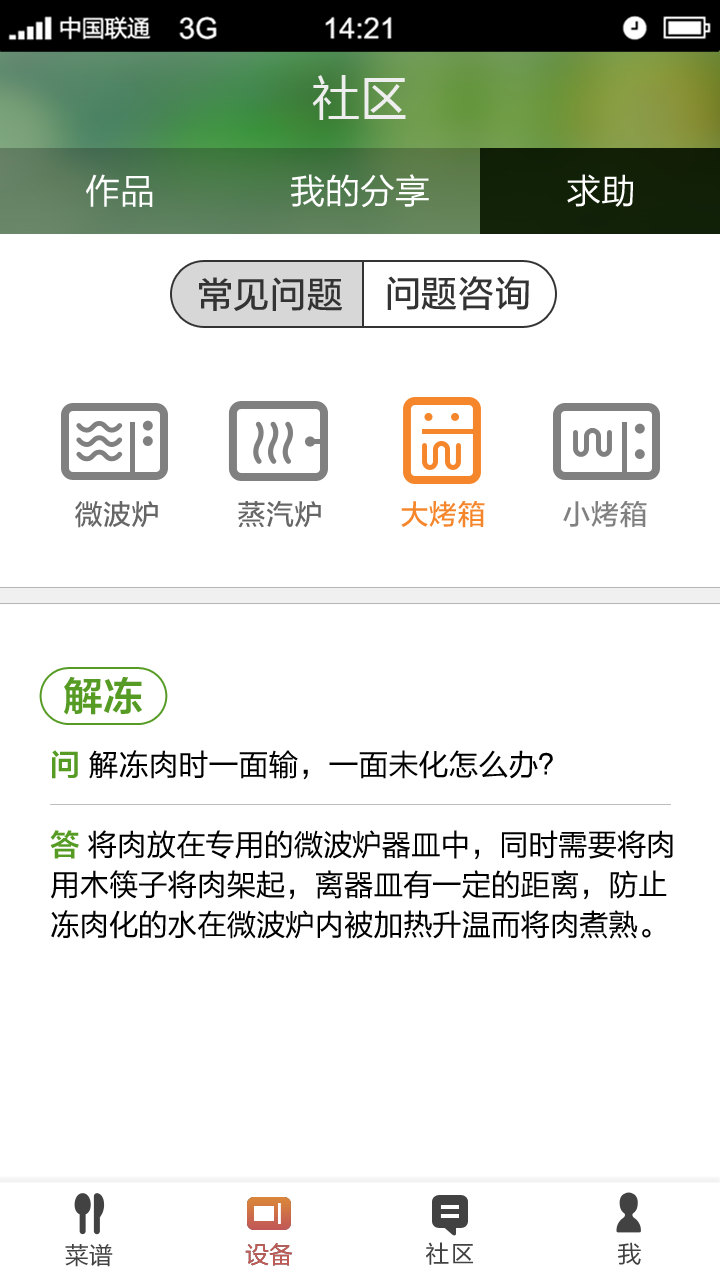
<style>
.page{position:relative;width:720px;height:1280px;background:#ffffff}
.page>*{position:absolute;margin:0}
.t1{font:48px "MicrosoftYaHei";color:#eeeeee}
.t2{font:35px "FZLTHK--GBK1-0";color:#ffffff}
.t3{font:36px "FZLTZHUNHK--GBK1-0";letter-spacing:0.015em;color:#333333}
.t4{font:28px "FZLTZHUNHK--GBK1-0";letter-spacing:0.015em;color:#666666}
.t5{font:28px "FZLTZHUNHK--GBK1-0";letter-spacing:0.015em;color:#f6862b}
.t6{font:28px "FZLTZHUNHK--GBK1-0";letter-spacing:0.015em;color:#808080}
.t7{font:40px "FZLTZCHK--GBK1-0";color:#569b23}
.t8{font:30px/40px "FZLTHK--GBK1-0";color:#000000}
.t9{font:30px/40px "FZLTZCHK--GBK1-0";color:#569b23}
.t10{font:24px "FZLTHK--GBK1-0";color:#424242}
.t11{font:24px "FZLTHK--GBK1-0";color:#c35a55}
.t12{font:24px "FZLTHK--GBK1-0";letter-spacing:0.05em;color:#424242}
</style>
<div class="page">
<p class="t1" style="left:312px;top:75px;width:94px;height:45px">社区</p>
<p class="t2" style="left:86px;top:174px;width:67px;height:33px">作品</p>
<p class="t2" style="left:291px;top:174px;width:138px;height:34px">我的分享</p>
<p class="t2" style="left:567px;top:174px;width:67px;height:33px">求助</p>
<p class="t3" style="left:199px;top:277px;width:143px;height:34px">常见问题</p>
<p class="t3" style="left:387px;top:276px;width:142px;height:35px">问题咨询</p>
<p class="t4" style="left:75px;top:501px;width:83px;height:27px">微波炉</p>
<p class="t4" style="left:238px;top:500px;width:83px;height:28px">蒸汽炉</p>
<p class="t5" style="left:401px;top:500px;width:84px;height:28px">大烤箱</p>
<p class="t6" style="left:563px;top:500px;width:84px;height:28px">小烤箱</p>
<p class="t7" style="left:64px;top:677px;width:78px;height:38px">解冻</p>
<p class="t8" style="left:50px;top:750px;width:623px;height:189px"><span class="t9">问 </span>解冻肉时一面输，一面未化怎么办？<br><span class="t9"><br>答 </span>将肉放在专用的微波炉器皿中，同时需要将肉用木筷子将肉架起，离器皿有一定的距离，防止冻肉化的水在微波炉内被加热升温而将肉煮熟。</p>
<p class="t10" style="left:65px;top:1244px;width:48px;height:23px">菜谱</p>
<p class="t11" style="left:245px;top:1243px;width:48px;height:23px">设备</p>
<p class="t11" style="left:245px;top:1243px;width:48px;height:23px">设备</p>
<p class="t12" style="left:426px;top:1242px;width:47px;height:23px">社区</p>
<p class="t12" style="left:618px;top:1242px;width:23px;height:23px">我</p>
</div>
